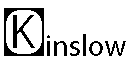
<style>
.page{position:relative;width:128px;height:64px;background:#ffffff}
.page>*{position:absolute;margin:0}
.t1{font:30px "MyriadPro-Regular";color:#000000}
</style>
<div class="page">
<p class="t1" style="left:47px;top:34px;width:79px;height:22px">inslow</p>
</div>
